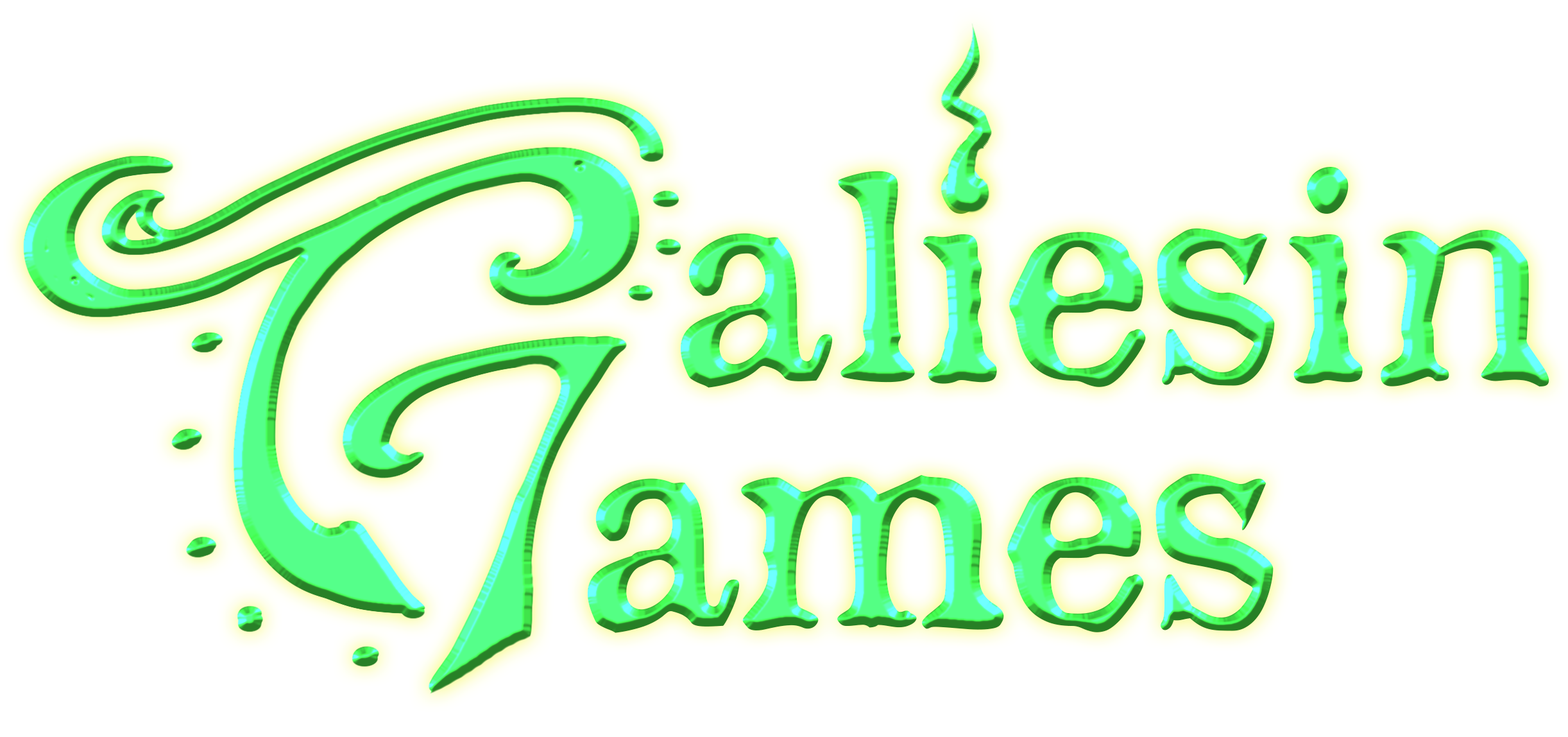
<style>
.page{position:relative;width:1568px;height:737px;background:#ffffff}
.page>*{position:absolute;margin:0}
.t1{font:279.4px/245.1px "OldNewspaperTypes";letter-spacing:-0.05em;scale:1.11 1}
</style>
<div class="page">
<p class="t1" style="left:587px;top:167px;width:962px;height:466px">aliesin<br>ames</p>
</div>
